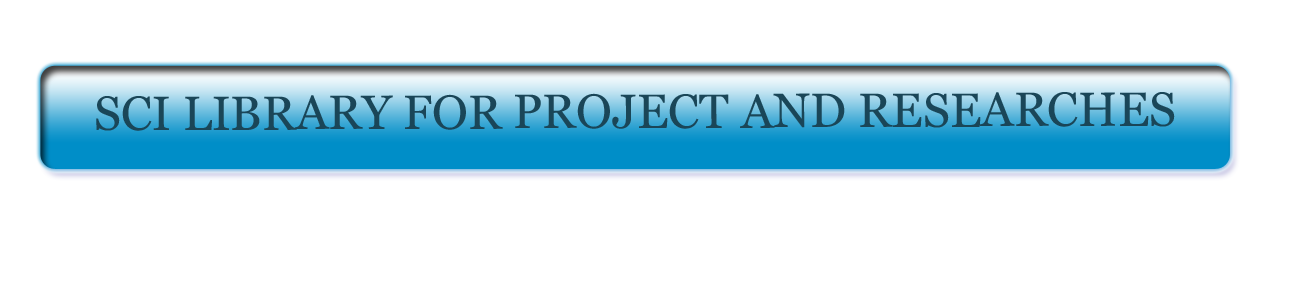
<style>
.page{position:relative;width:1300px;height:288px;background:#ffffff}
.page>*{position:absolute;margin:0}
.t1{font:48px "Georgia";color:#1a4658}
</style>
<div class="page">
<p class="t1" style="left:96px;top:92px;width:1079px;height:39px">SCI LIBRARY FOR PROJECT AND RESEARCHES</p>
</div>
